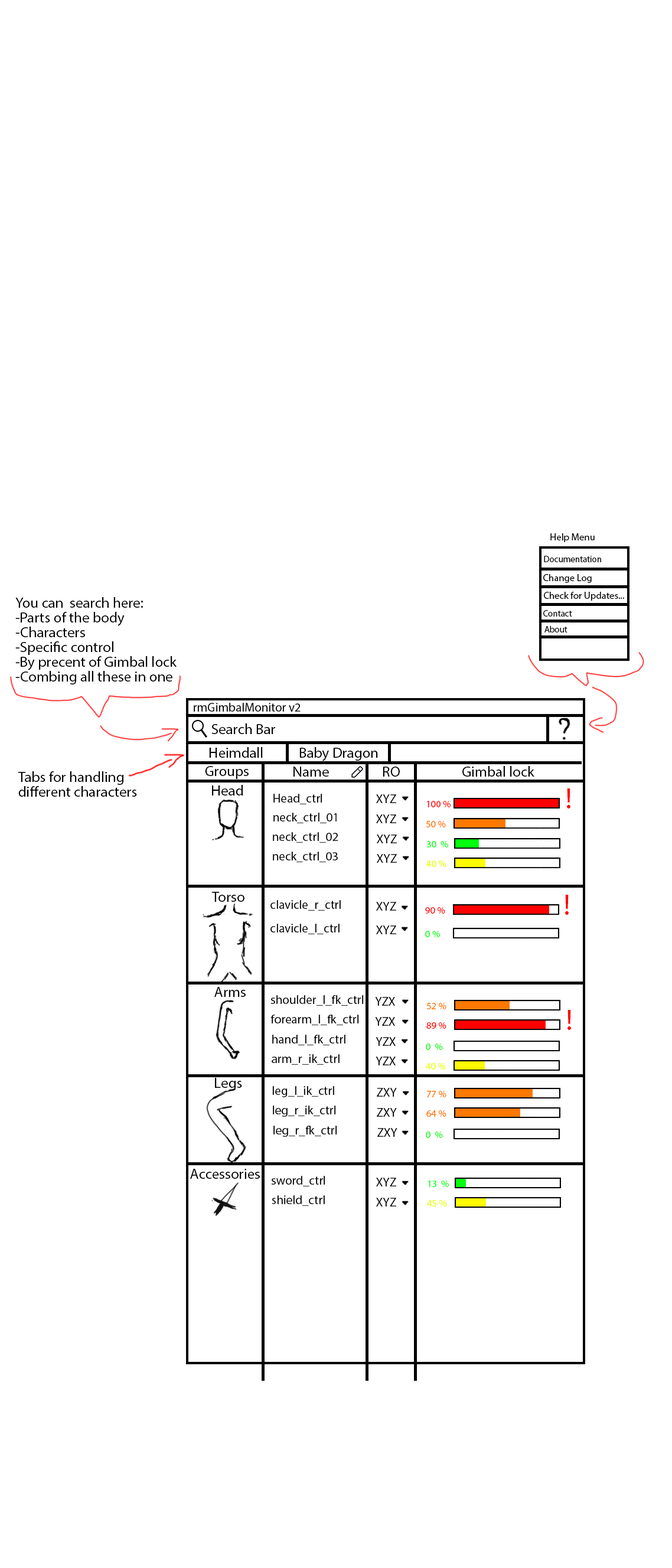
<style>
.page{position:relative;width:672px;height:1568px;background:#ffffff}
.page>*{position:absolute;margin:0}
.t1{font:9.8px "MyriadPro-Regular";color:#000000}
.t2{font:8.9px "MyriadPro-Regular";color:#000000}
.t3{font:14.8px/14.8px "MyriadPro-Regular";color:#000000}
.t4{font:12.4px "MyriadPro-Regular";color:#000000}
.t5{font:14.8px "MyriadPro-Regular";color:#000000}
.t6{font:29.5px "MyriadPro-Regular";color:#ff0000}
.t7{font:9.8px "MyriadPro-Regular";color:#ff0000}
.t8{font:9.8px "MyriadPro-Regular";color:#ff7800}
.t9{font:9.8px "MyriadPro-Regular";color:#00ff0d}
.t10{font:9.8px "MyriadPro-Regular";color:#eaff00}
</style>
<div class="page">
<p class="t1" style="left:550px;top:533px;width:45px;height:9px">Help Menu</p>
<p class="t2" style="left:544px;top:556px;width:57px;height:6px">Documentation</p>
<p class="t1" style="left:543px;top:574px;width:49px;height:9px">Change Log</p>
<p class="t1" style="left:544px;top:592px;width:80px;height:9px">Check for Updates...</p>
<p class="t3" style="left:15px;top:597px;width:162px;height:87px">You can  search here:<br>-Parts of the body<br>-Characters<br>-Specific control<br>-By precent of Gimbal lock<br>-Combing all these in one</p>
<p class="t2" style="left:543px;top:610px;width:29px;height:7px">Contact</p>
<p class="t2" style="left:545px;top:626px;width:23px;height:7px">About</p>
<p class="t4" style="left:194px;top:703px;width:107px;height:9px">rmGimbalMonitor v2</p>
<p class="t5" style="left:211px;top:723px;width:64px;height:11px">Search Bar</p>
<p class="t5" style="left:209px;top:747px;width:54px;height:11px">Heimdall</p>
<p class="t5" style="left:299px;top:747px;width:79px;height:14px">Baby Dragon</p>
<p class="t3" style="left:18px;top:771px;width:119px;height:26px">Tabs for handling<br>different characters</p>
<p class="t5" style="left:205px;top:766px;width:44px;height:13px">Groups</p>
<p class="t5" style="left:294px;top:767px;width:35px;height:10px">Name</p>
<p class="t5" style="left:383px;top:767px;width:17px;height:10px">RO</p>
<p class="t5" style="left:462px;top:766px;width:72px;height:11px">Gimbal lock</p>
<p class="t5" style="left:212px;top:785px;width:31px;height:11px">Head</p>
<p class="t4" style="left:273px;top:794px;width:49px;height:10px">Head_ctrl</p>
<p class="t4" style="left:376px;top:794px;width:20px;height:9px">XYZ</p>
<p class="t6" style="left:567px;top:788px;width:4px;height:21px">!</p>
<p class="t7" style="left:426px;top:801px;width:25px;height:6px">100 %</p>
<p class="t4" style="left:273px;top:813px;width:64px;height:10px">neck_ctrl_01</p>
<p class="t4" style="left:376px;top:814px;width:20px;height:9px">XYZ</p>
<p class="t8" style="left:426px;top:821px;width:20px;height:6px">50 %</p>
<p class="t4" style="left:273px;top:832px;width:65px;height:11px">neck_ctrl_02</p>
<p class="t4" style="left:377px;top:834px;width:20px;height:9px">XYZ</p>
<p class="t9" style="left:426px;top:841px;width:22px;height:6px">30  %</p>
<p class="t4" style="left:273px;top:852px;width:65px;height:10px">neck_ctrl_03</p>
<p class="t4" style="left:377px;top:854px;width:20px;height:9px">XYZ</p>
<p class="t10" style="left:426px;top:860px;width:20px;height:7px">40 %</p>
<p class="t5" style="left:211px;top:892px;width:34px;height:10px">Torso</p>
<p class="t4" style="left:270px;top:900px;width:71px;height:11px">clavicle_r_ctrl</p>
<p class="t4" style="left:376px;top:902px;width:20px;height:9px">XYZ</p>
<p class="t6" style="left:565px;top:895px;width:4px;height:20px">!</p>
<p class="t7" style="left:425px;top:907px;width:20px;height:7px">90 %</p>
<p class="t4" style="left:270px;top:924px;width:70px;height:10px">clavicle_l_ctrl</p>
<p class="t4" style="left:376px;top:925px;width:20px;height:9px">XYZ</p>
<p class="t9" style="left:425px;top:931px;width:15px;height:6px">0 %</p>
<p class="t5" style="left:214px;top:987px;width:32px;height:10px">Arms</p>
<p class="t4" style="left:270px;top:995px;width:94px;height:11px">shoulder_l_fk_ctrl</p>
<p class="t4" style="left:375px;top:997px;width:20px;height:9px">YZX</p>
<p class="t8" style="left:426px;top:1003px;width:20px;height:6px">52 %</p>
<p class="t6" style="left:568px;top:1010px;width:3px;height:20px">!</p>
<p class="t4" style="left:270px;top:1015px;width:89px;height:10px">forearm_l_fk_ctrl</p>
<p class="t4" style="left:375px;top:1017px;width:20px;height:9px">YZX</p>
<p class="t7" style="left:426px;top:1022px;width:20px;height:7px">89 %</p>
<p class="t4" style="left:272px;top:1035px;width:73px;height:10px">hand_l_fk_ctrl</p>
<p class="t4" style="left:376px;top:1037px;width:20px;height:9px">YZX</p>
<p class="t9" style="left:426px;top:1044px;width:17px;height:6px">0  %</p>
<p class="t4" style="left:272px;top:1054px;width:68px;height:11px">arm_r_ik_ctrl</p>
<p class="t4" style="left:376px;top:1057px;width:20px;height:8px">YZX</p>
<p class="t10" style="left:426px;top:1063px;width:20px;height:7px">40 %</p>
<p class="t5" style="left:215px;top:1078px;width:27px;height:13px">Legs</p>
<p class="t4" style="left:272px;top:1086px;width:62px;height:11px">leg_l_ik_ctrl</p>
<p class="t4" style="left:377px;top:1088px;width:20px;height:9px">ZXY</p>
<p class="t8" style="left:426px;top:1091px;width:20px;height:6px">77 %</p>
<p class="t4" style="left:273px;top:1106px;width:63px;height:11px">leg_r_ik_ctrl</p>
<p class="t4" style="left:377px;top:1108px;width:20px;height:9px">ZXY</p>
<p class="t8" style="left:426px;top:1110px;width:20px;height:7px">64 %</p>
<p class="t4" style="left:273px;top:1126px;width:64px;height:11px">leg_r_fk_ctrl</p>
<p class="t4" style="left:377px;top:1128px;width:20px;height:9px">ZXY</p>
<p class="t9" style="left:426px;top:1132px;width:17px;height:6px">0  %</p>
<p class="t5" style="left:190px;top:1169px;width:70px;height:10px">Accessories</p>
<p class="t4" style="left:271px;top:1176px;width:54px;height:10px">sword_ctrl</p>
<p class="t4" style="left:376px;top:1178px;width:20px;height:8px">XYZ</p>
<p class="t9" style="left:428px;top:1181px;width:21px;height:6px">13  %</p>
<p class="t4" style="left:272px;top:1195px;width:53px;height:11px">shield_ctrl</p>
<p class="t4" style="left:376px;top:1198px;width:20px;height:9px">XYZ</p>
<p class="t10" style="left:427px;top:1200px;width:20px;height:7px">45 %</p>
</div>
